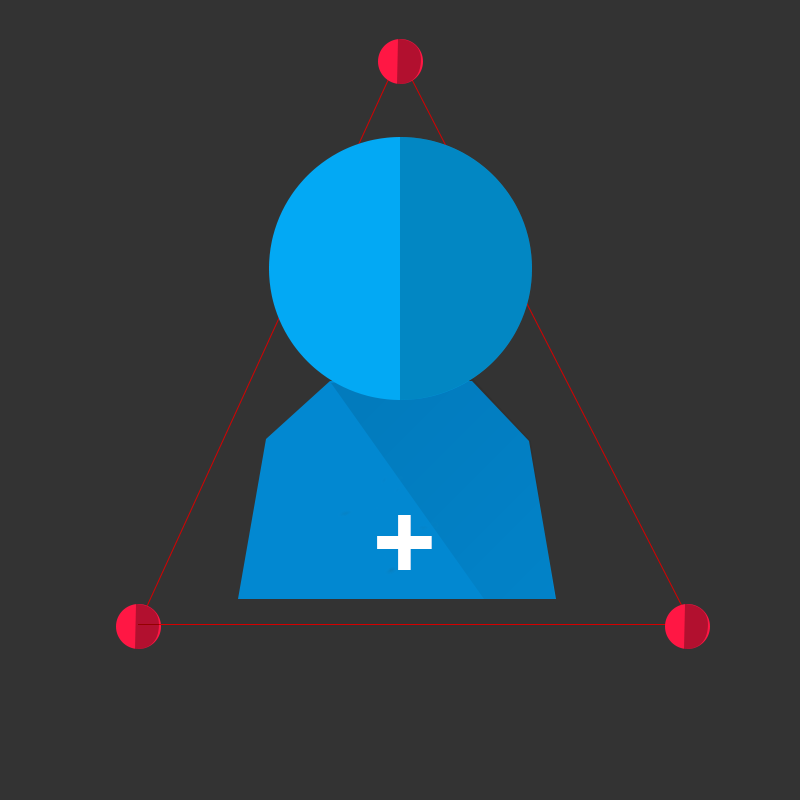
<style>
.page{position:relative;width:800px;height:800px;background:#333333}
.page>*{position:absolute;margin:0}
.t1{font:23.8px "Rockwell-BoldItalic";color:#ffffff}
</style>
<div class="page">
<p class="t1" style="left:377px;top:515px;width:55px;height:55px">+</p>
</div>
